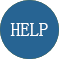
<style>
.page{position:relative;width:59px;height:59px;background:#276493}
.page>*{position:absolute;margin:0}
.t1{font:18.7px "SimSun";color:#ffffff}
</style>
<div class="page">
<p class="t1" style="left:10px;top:23px;width:38px;height:13px">HELP</p>
</div>
